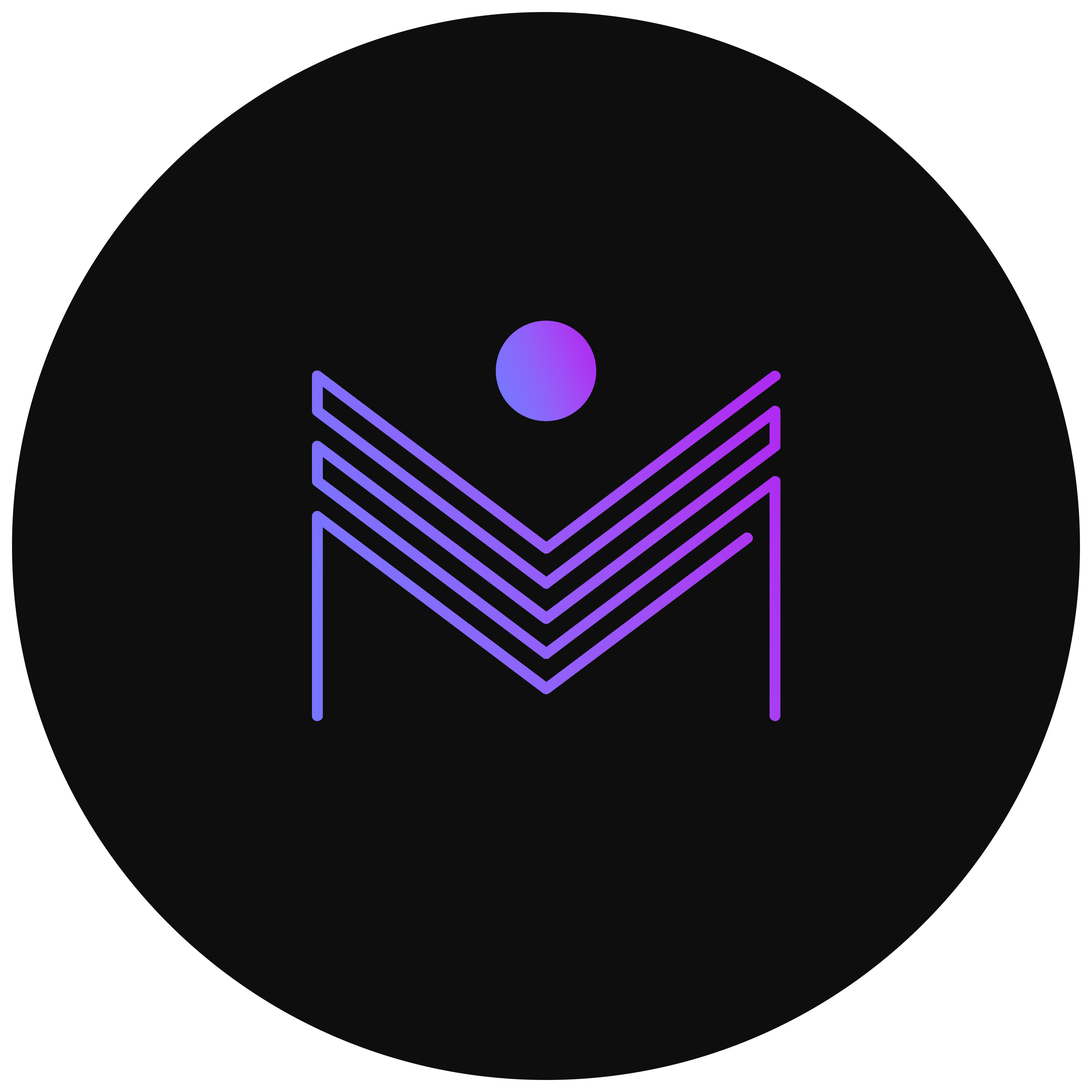
<style>
.page{position:relative;width:1092px;height:1092px;background:#0e0e0e}
.page>*{position:absolute;margin:0}
.t1{font:471.7px "Razor"}
</style>
<div class="page">
<p class="t1" style="left:312px;top:370px;width:469px;height:351px">M</p>
</div>
